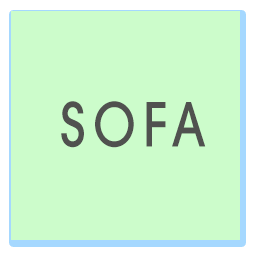
<style>
.page{position:relative;width:256px;height:256px;background:#ccfccb}
.page>*{position:absolute;margin:0}
.t1{font:60px "AvantGarde-Medium";letter-spacing:0.15em;color:#50514f;text-transform:uppercase;scale:0.84 1}
</style>
<div class="page">
<p class="t1" style="left:61px;top:101px;width:145px;height:47px">SOFA</p>
</div>
